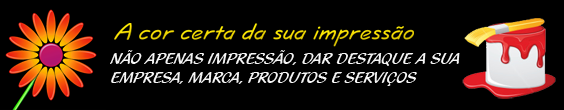
<style>
.page{position:relative;width:564px;height:110px;background:#000000}
.page>*{position:absolute;margin:0}
.t1{font:16px "BlacklightD";color:#f5f5f5}
</style>
<div class="page">
<p class="t1" style="left:110px;top:50px;width:350px;height:36px">NÃO APENAS IMPRESSÃO, DAR DESTAQUE A SUA<br>EMPRESA, MARCA, PRODUTOS E SERVIÇOS</p>
</div>
